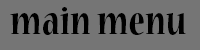
<style>
.page{position:relative;width:200px;height:50px;background:#757575}
.page>*{position:absolute;margin:0}
.t1{font:44px "NuevaStd-BoldCond";color:#000000}
</style>
<div class="page">
<p class="t1" style="left:10px;top:7px;width:176px;height:28px">main menu</p>
</div>
